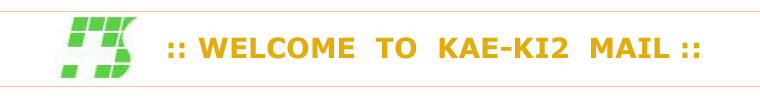
<style>
.page{position:relative;width:760px;height:100px;background:#ffffff}
.page>*{position:absolute;margin:0}
.t1{font:28px "Verdana-Bold";color:#e1ac0c}
.t2{font:30px "Verdana-Bold";color:#e1ac0c}
</style>
<div class="page">
<p class="t1" style="left:168px;top:37px;width:531px;height:22px"><span class="t2">     </span>:: WELCOME  TO  KAE-KI2  MAIL ::</p>
</div>
